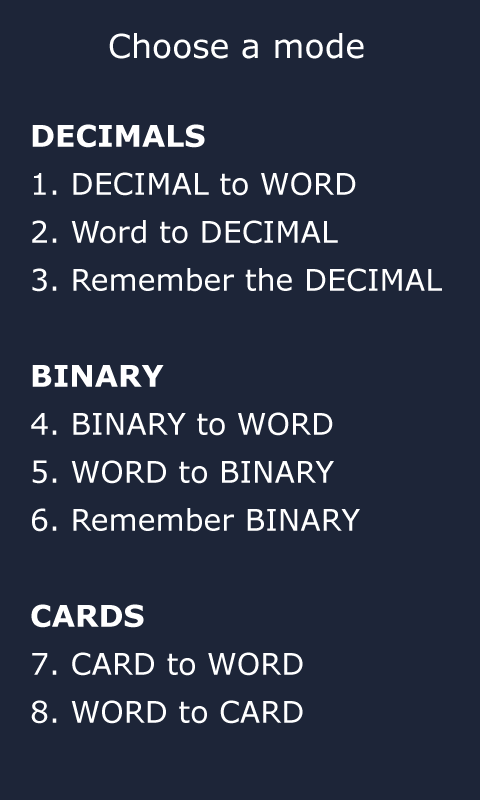
<style>
.page{position:relative;width:480px;height:800px;background:#1d2538}
.page>*{position:absolute;margin:0}
.t1{font:33.1px "Verdana";color:#ffffff}
.t2{font:30px/48px "Verdana";color:#ffffff}
.t3{font:30px/48px "Verdana-Bold";color:#ffffff}
</style>
<div class="page">
<p class="t1" style="left:109px;top:33px;width:255px;height:26px">Choose a mode</p>
<p class="t2" style="left:31px;top:124px;width:411px;height:600px"><span class="t3">DECIMALS<br></span>1. DECIMAL to WORD<br>2. Word to DECIMAL<br>3. Remember the DECIMAL<br><br><span class="t3">BINARY<br></span>4. BINARY to WORD<br>5. WORD to BINARY<br>6. Remember BINARY<br><br><span class="t3">CARDS<br></span>7. CARD to WORD<br>8. WORD to CARD<br>9. Remember cards</p>
</div>
